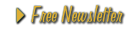
<style>
.page{position:relative;width:128px;height:32px;background:#ffffff}
.page>*{position:absolute;margin:0}
.t1{font:22.2px "TikiHoliday";letter-spacing:0.03em;color:#deaf35;scale:1.1 1}
</style>
<div class="page">
<p class="t1" style="left:31px;top:5px;width:92px;height:17px">Free Newsletter</p>
</div>
